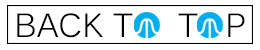
<style>
.page{position:relative;width:260px;height:50px;background:#ffffff}
.page>*{position:absolute;margin:0}
.t1{font:33.3px "Kalinga";color:#000000}
</style>
<div class="page">
<p class="t1" style="left:17px;top:13px;width:228px;height:25px">BACK T     T   P</p>
</div>
